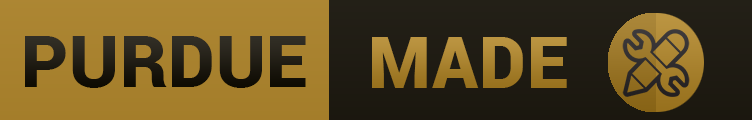
<style>
.page{position:relative;width:752px;height:120px}
.page>*{position:absolute;margin:0}
.t1{font:72px "Roboto-Black";letter-spacing:0.01em;color:#100c02}
.t2{font:72px "Roboto-Black";letter-spacing:0.01em;color:#b08322}
</style>
<div class="page">
<p class="t1" style="left:25px;top:36px;width:281px;height:52px">PURDUE</p>
<p class="t2" style="left:372px;top:37px;width:195px;height:51px">MADE</p>
</div>
